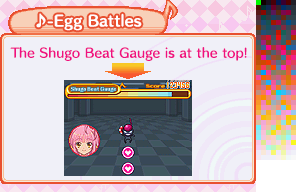
<style>
.page{position:relative;width:296px;height:192px;background:#f0f0f8}
.page>*{position:absolute;margin:0}
.t1{font:14px "HummingStd-B";letter-spacing:0.02em;color:#ffffff}
.t2{font:12px "HummingStd-D";letter-spacing:0.02em;color:#f01080}
</style>
<div class="page">
<p class="t1" style="left:36px;top:13px;width:106px;height:18px">♪-Egg Battles</p>
<p class="t2" style="left:10px;top:47px;width:237px;height:14px">The Shugo Beat Gauge is at the top!</p>
</div>
